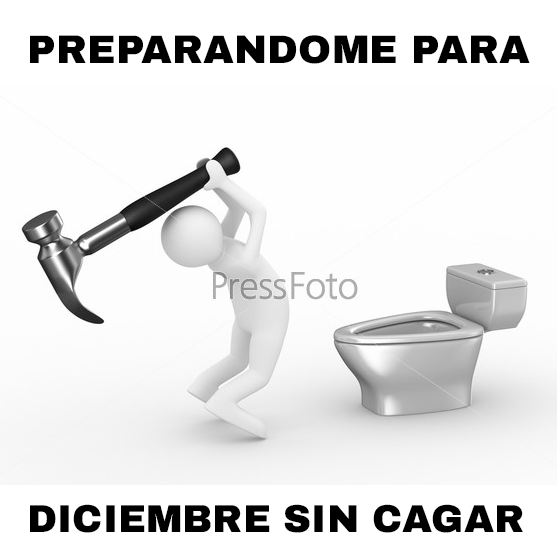
<style>
.page{position:relative;width:557px;height:557px;background:#ffffff}
.page>*{position:absolute;margin:0}
.t1{font:39.9px "ArchivoBlack-Regular";color:#000000}
.t2{font:38.8px "ArchivoBlack-Regular";color:#000000}
</style>
<div class="page">
<p class="t1" style="left:30px;top:35px;width:500px;height:29px">PREPARANDOME PARA</p>
<p class="t2" style="left:30px;top:504px;width:493px;height:29px">DICIEMBRE SIN CAGAR</p>
</div>
